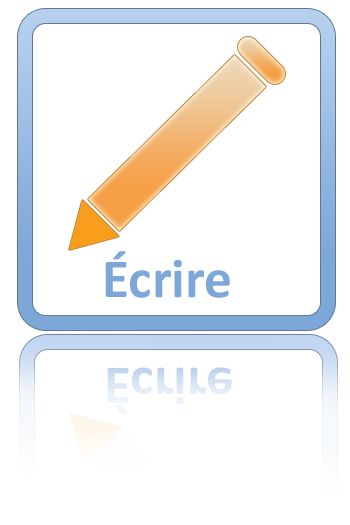
<style>
.page{position:relative;width:350px;height:525px;background:#ffffff}
.page>*{position:absolute;margin:0}
.t1{font:55.4px "Calibri-Bold";color:#7da7d9}
.t2{font:55.1px "Calibri-Bold";color:#d8e5f4}
</style>
<div class="page">
<p class="t1" style="left:105px;top:251px;width:125px;height:47px">Écrire</p>
<p class="t2" style="left:107px;top:367px;width:125px;height:47px">Écrire</p>
</div>
